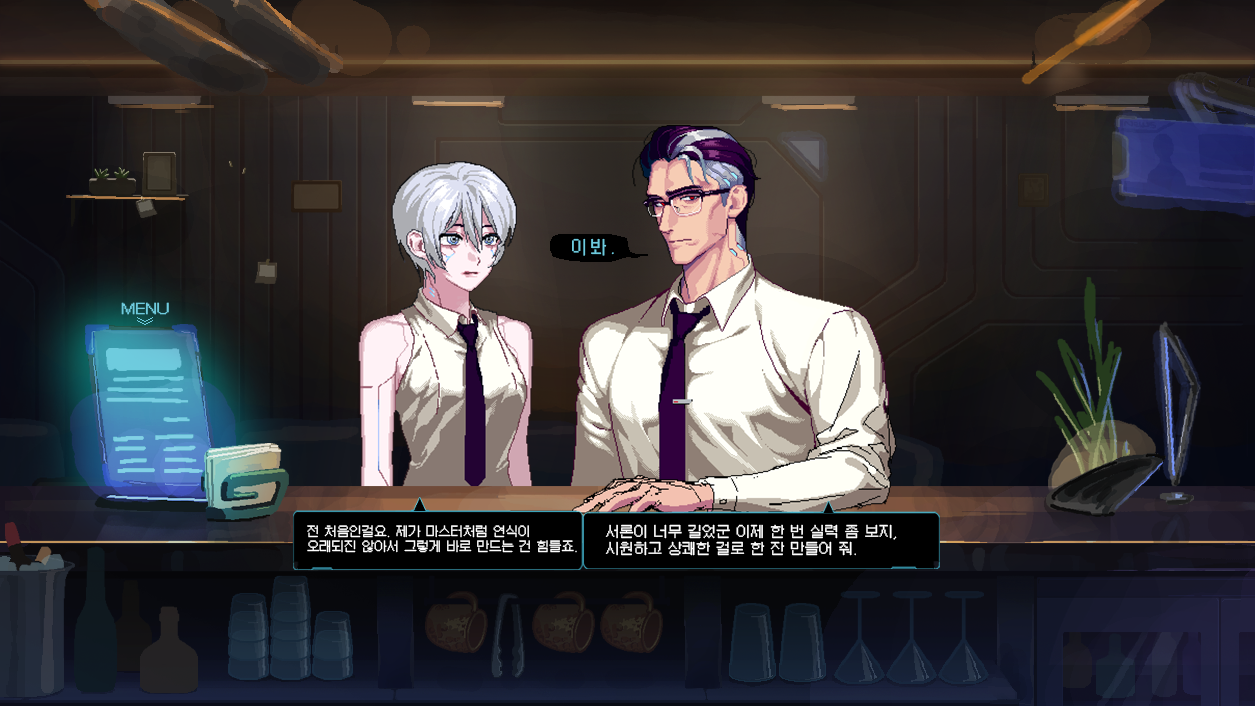
<style>
.page{position:relative;width:1255px;height:706px}
.page>*{position:absolute;margin:0}
.t1{font:18.1px "MonaS10x12-Regular";letter-spacing:0.14em;color:#6ecadd;scale:1.09 1}
.t2{font:12.4px "Galmuri11-Regular";color:#6ecadd;font-weight:bold;scale:1.32 1}
.t3{font:12.4px "Galmuri11-Regular";color:#ffffff}
.t4{font:14.1px "Galmuri11-Regular";color:#ffffff}
</style>
<div class="page">
<p class="t1" style="left:572px;top:238px;width:42px;height:18px">이봐.</p>
<p class="t2" style="left:121px;top:302px;width:48px;height:13px">MENU</p>
<p class="t3" style="left:307px;top:525px;width:270px;height:28px">전 처음인걸요. 제가 마스터처럼 연식이 <br>오래되진 않아서 그렇게 바로 만드는 건 힘들죠.</p>
<p class="t4" style="left:605px;top:524px;width:292px;height:32px">서론이 너무 길었군 이제 한 번 실력 좀 보지, <br>시원하고 상쾌한 걸로 한 잔 만들어 줘.</p>
</div>
